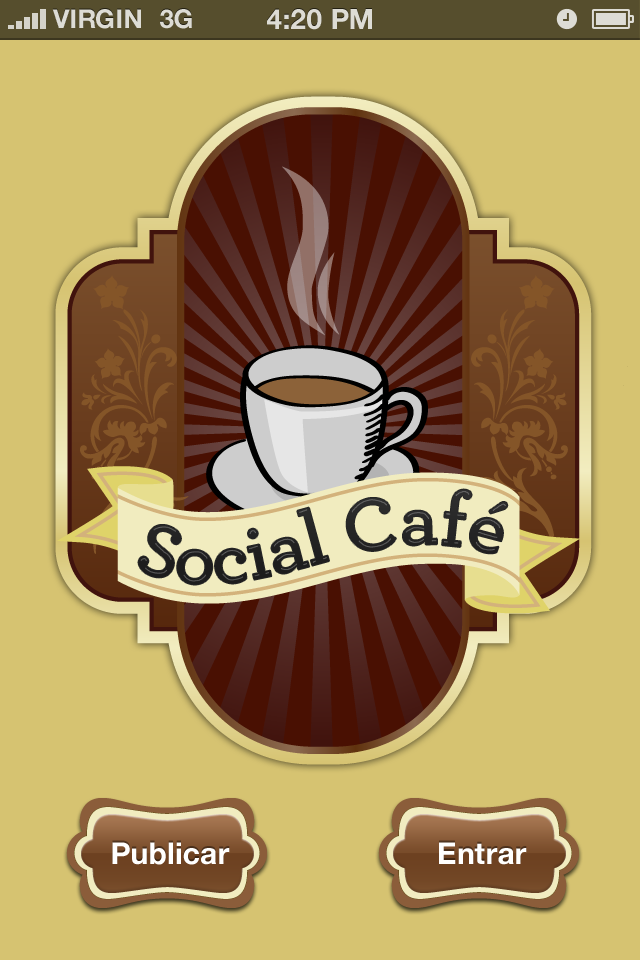
<style>
.page{position:relative;width:640px;height:960px;background:#d6c371}
.page>*{position:absolute;margin:0}
.t1{font:26px "HelveticaNeue-Bold";color:#dddcd5;text-transform:uppercase}
.t2{font:28px "HelveticaNeue-Bold";color:#dddcd5;text-transform:uppercase}
.t3{font:30px "HelveticaNeue-Bold";letter-spacing:0.005em;color:#ffffff}
</style>
<div class="page">
<p class="t1" style="left:52px;top:9px;width:89px;height:20px">VIRGIN</p>
<p class="t1" style="left:160px;top:9px;width:32px;height:20px">3G</p>
<p class="t2" style="left:267px;top:9px;width:105px;height:21px">4:20 pM</p>
<p class="t3" style="left:112px;top:842px;width:118px;height:23px">Publicar</p>
<p class="t3" style="left:439px;top:842px;width:88px;height:23px">Entrar</p>
</div>
